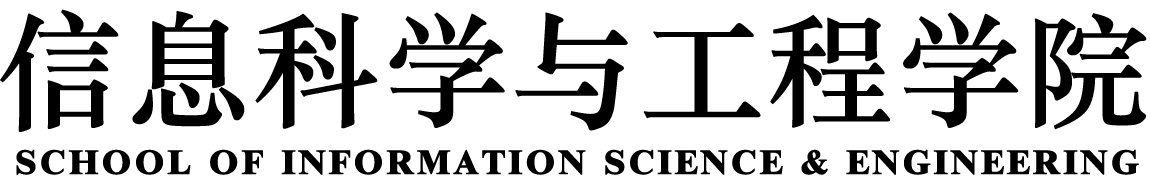
<style>
.page{position:relative;width:1150px;height:180px;background:#ffffff}
.page>*{position:absolute;margin:0}
.t1{font:125px "STZhongsong";color:#000000;font-weight:bold}
.t2{font:48.6px "TimesNewRomanPS-BoldMT";letter-spacing:0.035em;color:#000000;font-variant:small-caps;font-weight:bold}
</style>
<div class="page">
<p class="t1" style="left:0px;top:9px;width:1147px;height:123px">信息科学与工程学院</p>
<p class="t2" style="left:16px;top:149px;width:1123px;height:26px">school of information science &amp; engineering</p>
</div>
